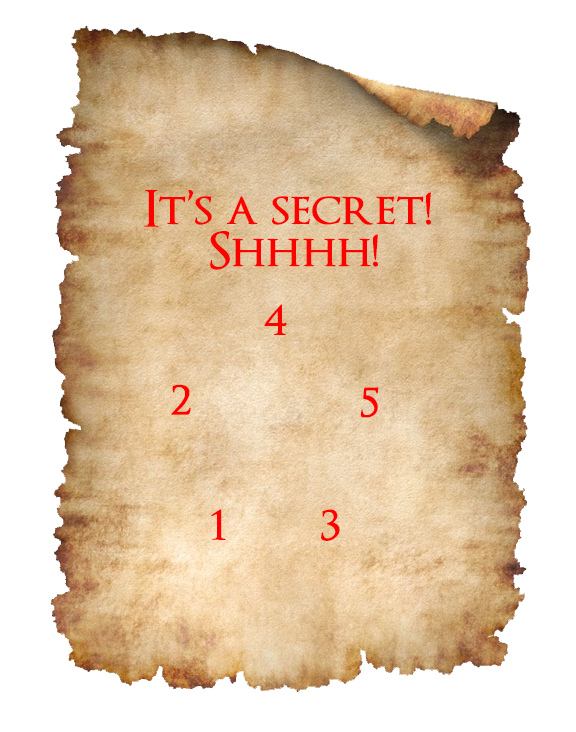
<style>
.page{position:relative;width:576px;height:732px;background:#ffffff}
.page>*{position:absolute;margin:0}
.t1{font:50px/41.7px "OptimusPrincepsSemiBold";color:#ff0000}
.t2{font:50px "OptimusPrincepsSemiBold";color:#ff0000}
</style>
<div class="page">
<p class="t1" style="left:144px;top:190px;width:287px;height:80px;text-align:center">It’s a secret! <br>Shhhh!</p>
<p class="t2" style="left:264px;top:304px;width:23px;height:31px">4</p>
<p class="t2" style="left:171px;top:384px;width:20px;height:31px">2</p>
<p class="t2" style="left:361px;top:387px;width:18px;height:31px">5</p>
<p class="t2" style="left:211px;top:509px;width:15px;height:31px">1</p>
<p class="t2" style="left:321px;top:509px;width:19px;height:32px">3</p>
</div>
